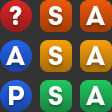
<style>
.page{position:relative;width:112px;height:112px;background:#333333}
.page>*{position:absolute;margin:0}
.t1{font:26px "Scandia-Bold";color:#ffffff}
</style>
<div class="page">
<p class="t1" style="left:9px;top:6px;width:13px;height:19px">?</p>
<p class="t1" style="left:48px;top:6px;width:15px;height:19px">S</p>
<p class="t1" style="left:86px;top:6px;width:19px;height:19px">A</p>
<p class="t1" style="left:6px;top:46px;width:19px;height:19px">A</p>
<p class="t1" style="left:48px;top:46px;width:15px;height:19px">S</p>
<p class="t1" style="left:86px;top:46px;width:19px;height:19px">A</p>
<p class="t1" style="left:9px;top:86px;width:15px;height:19px">P</p>
<p class="t1" style="left:48px;top:86px;width:15px;height:19px">S</p>
<p class="t1" style="left:86px;top:86px;width:19px;height:19px">A</p>
</div>
